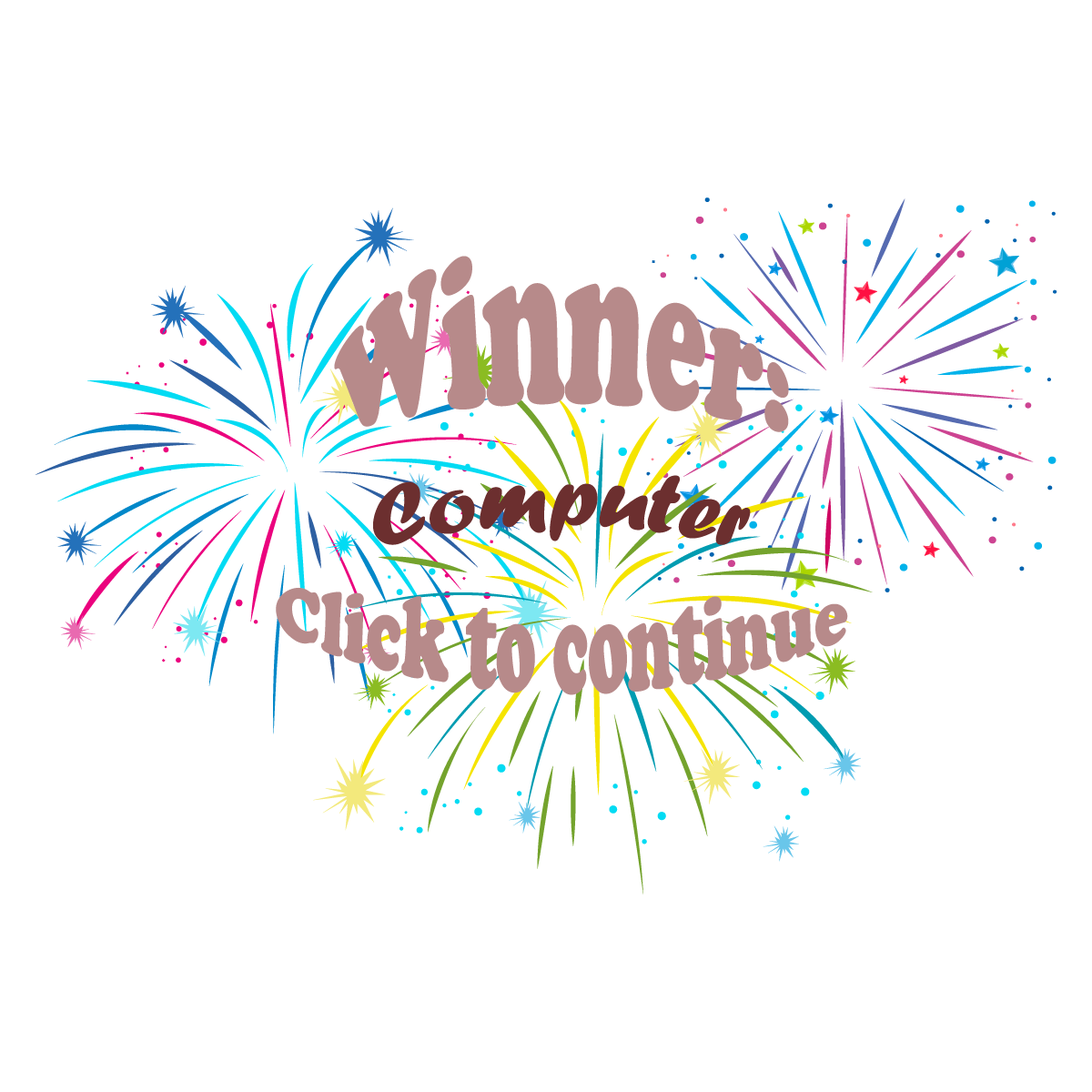
<style>
.page{position:relative;width:1092px;height:1092px;background:#ffffff}
.page>*{position:absolute;margin:0}
.t1{font:110.9px "CooperBlack";color:#b78a8a}
.t2{font:86.4px "ForteMT";color:#6c2f2f}
.t3{font:65.5px "CooperBlack";color:#b78a8a}
</style>
<div class="page">
<p class="t1" style="left:334px;top:256px;width:455px;height:176px">Winner:</p>
<p class="t2" style="left:373px;top:475px;width:378px;height:70px">Computer</p>
<p class="t3" style="left:276px;top:588px;width:572px;height:107px">Click to continue</p>
</div>
